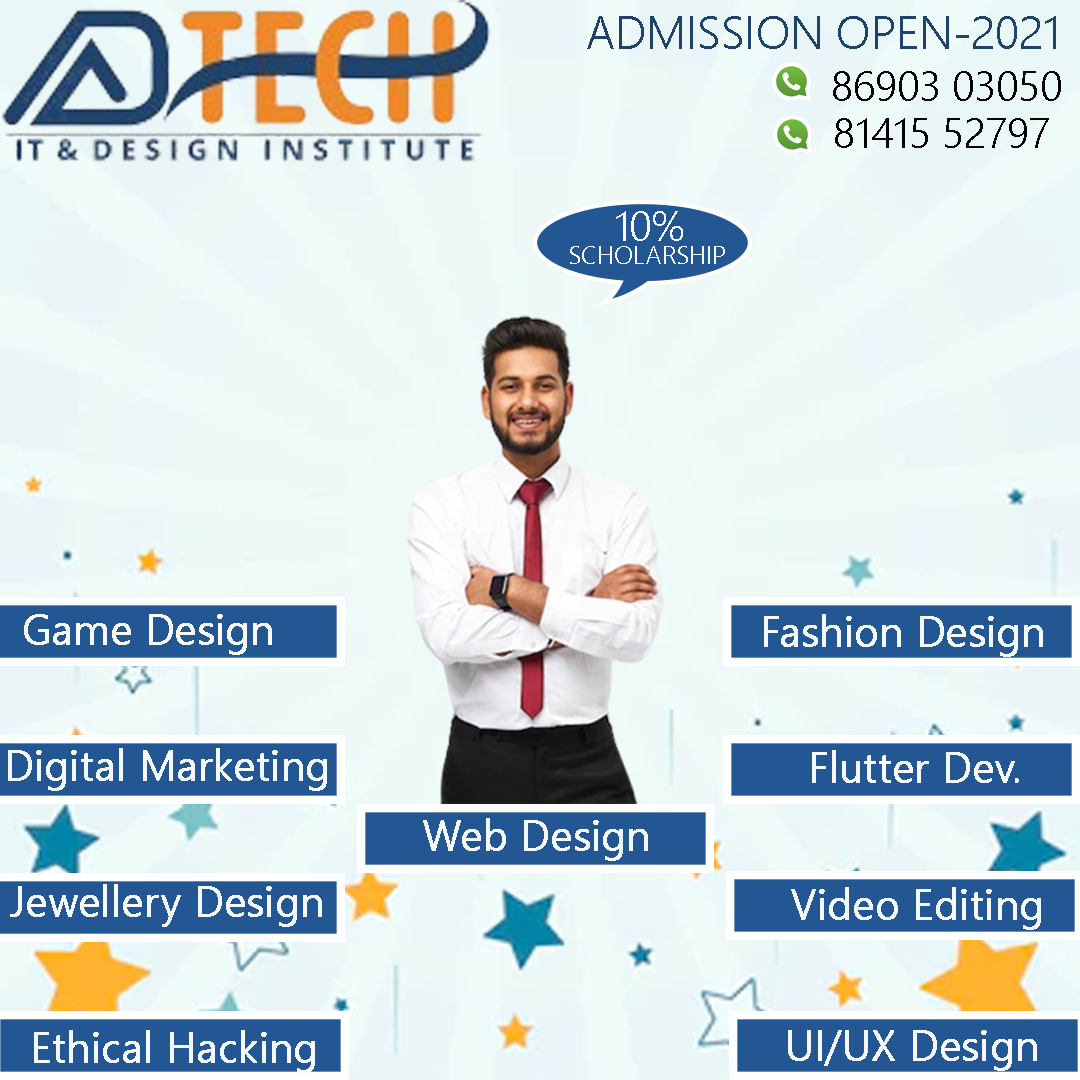
<style>
.page{position:relative;width:1080px;height:1080px}
.page>*{position:absolute;margin:0}
.t1{font:45.8px "NirmalaUI-Semilight";color:#20436b;text-transform:uppercase}
.t2{font:41.7px "NirmalaUI-Semilight";color:#030303}
.t3{font:41.7px "NirmalaUI-Semilight";color:#f9fafb;text-transform:uppercase}
.t4{font:25px "NirmalaUI-Semilight";color:#f9fafb;text-transform:uppercase}
.t5{font:41.7px "NirmalaUI-Semilight";color:#fbfaf9;font-weight:bold}
.t6{font:41.7px "NirmalaUI-Semilight";color:#f5f8fc;font-weight:bold}
</style>
<div class="page">
<p class="t1" style="left:587px;top:16px;width:469px;height:33px">ADMISSION OPEN-2021</p>
<p class="t2" style="left:833px;top:71px;width:228px;height:30px">86903 03050</p>
<p class="t2" style="left:835px;top:118px;width:214px;height:30px">81415 52797</p>
<p class="t3" style="left:616px;top:211px;width:67px;height:30px">10%</p>
<p class="t4" style="left:570px;top:246px;width:155px;height:18px">SCHOLARSHIP</p>
<p class="t5" style="left:24px;top:614px;width:248px;height:41px">Game Design</p>
<p class="t6" style="left:764px;top:614px;width:279px;height:43px">Fashion Design</p>
<p class="t6" style="left:8px;top:748px;width:319px;height:43px">Digital Marketing</p>
<p class="t6" style="left:812px;top:750px;width:207px;height:33px">Flutter Dev.</p>
<p class="t6" style="left:423px;top:818px;width:225px;height:43px">Web Design</p>
<p class="t6" style="left:10px;top:884px;width:312px;height:43px">Jewellery Design</p>
<p class="t6" style="left:791px;top:887px;width:250px;height:43px">Video Editing</p>
<p class="t6" style="left:34px;top:1030px;width:281px;height:43px">Ethical Hacking</p>
<p class="t6" style="left:788px;top:1030px;width:249px;height:41px">UI/UX Design</p>
</div>
